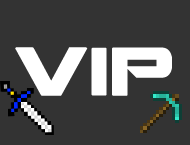
<style>
.page{position:relative;width:190px;height:145px;background:#333333}
.page>*{position:absolute;margin:0}
.t1{font:66.8px "CGFLocustResistance";color:#fefefe;font-weight:bold}
</style>
<div class="page">
<p class="t1" style="left:15px;top:47px;width:157px;height:49px">VIP</p>
</div>
